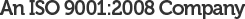
<style>
.page{position:relative;width:245px;height:19px;background:#ffffff}
.page>*{position:absolute;margin:0}
.t1{font:20px "Museo700-Regular";letter-spacing:-0.05em;color:#333333}
</style>
<div class="page">
<p class="t1" style="left:0px;top:0px;width:245px;height:19px">An ISO 9001:2008 Company</p>
</div>
